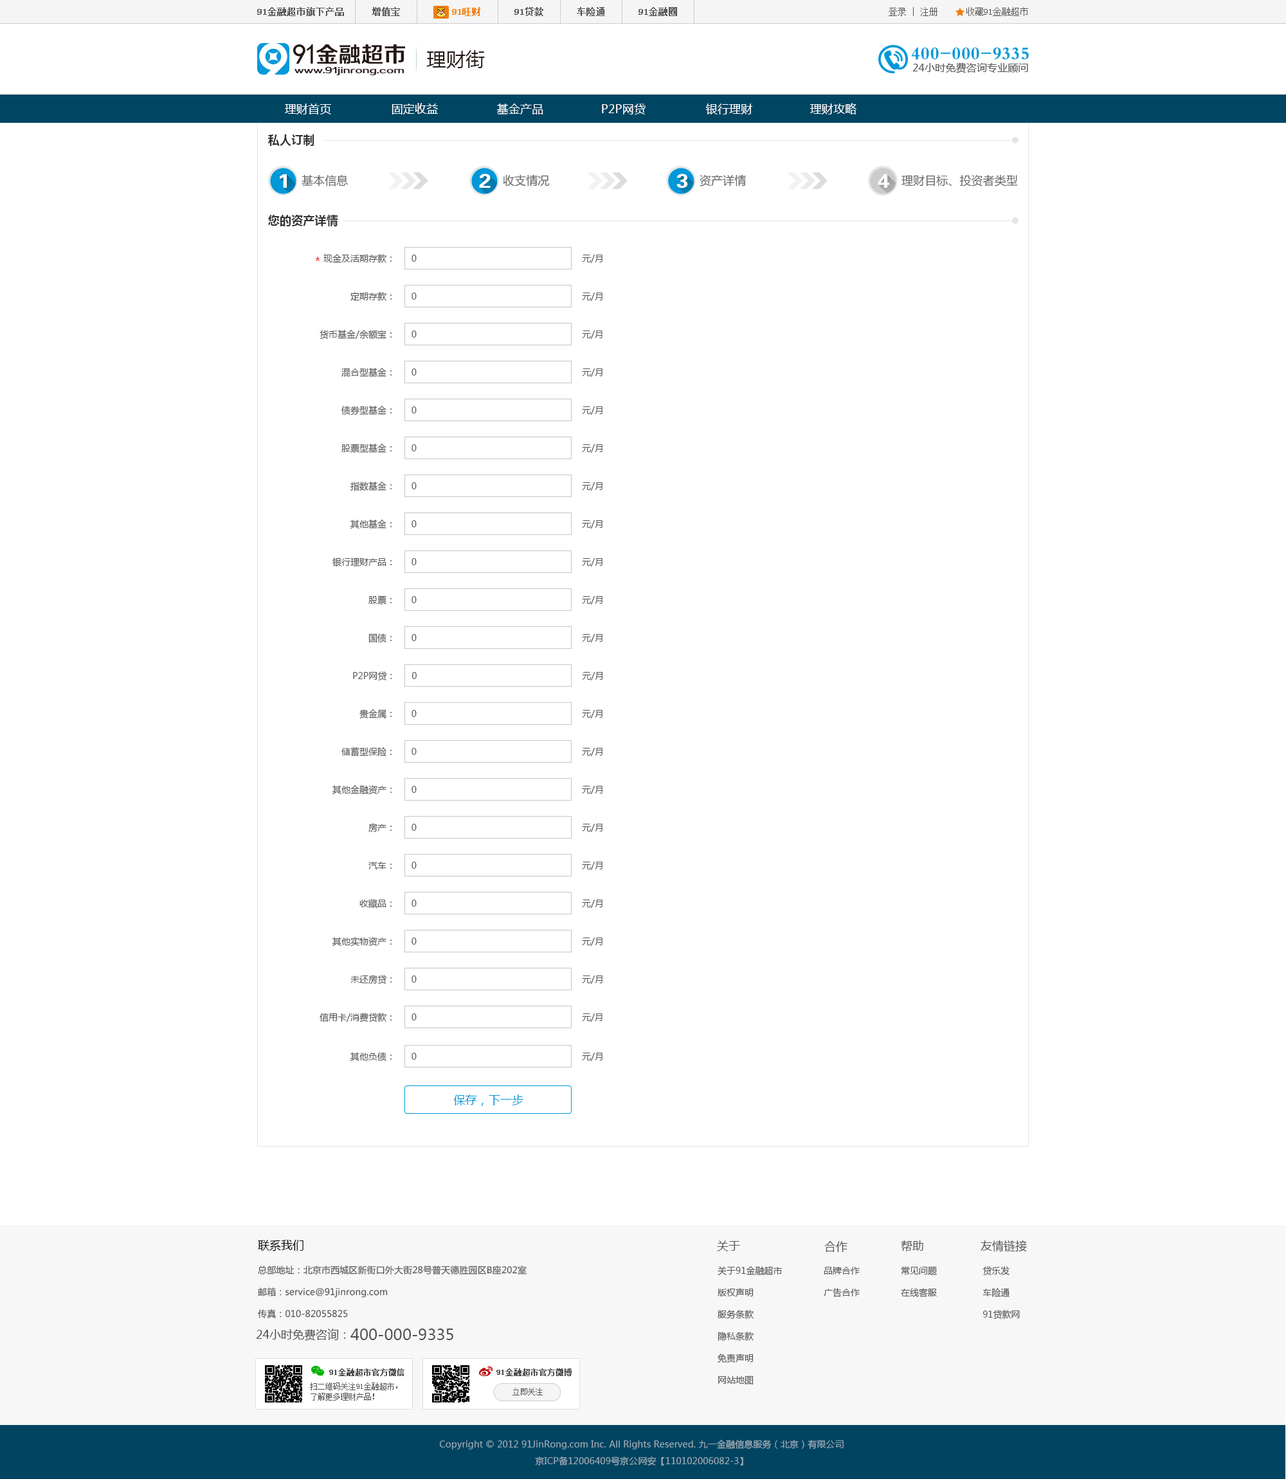
<style>
.page{position:relative;width:1286px;height:1479px;background:#ffffff}
.page>*{position:absolute;margin:0}
.t1{font:19.3px "MicrosoftYaHei";letter-spacing:0.01em;color:#231815}
.t2{font:11.6px "MicrosoftYaHei";letter-spacing:0.01em;color:#ffffff}
.t3{font:11.6px "MicrosoftYaHei-Bold";letter-spacing:0.01em;color:#333333}
.t4{font:19.6px "FZDHTJW--GB1-0";color:#fefeff;scale:1.12 1}
.t5{font:19.6px "FZDHTJW--GB1-0";color:#fefefe;scale:1.12 1}
.t6{font:19.6px "FZDHTJW--GB1-0";color:#ffffff;scale:1.12 1}
.t7{font:11.6px "MicrosoftYaHei";color:#666666}
.t8{font:11.6px "MicrosoftYaHei";letter-spacing:0.01em;color:#ff0000}
.t9{font:9px "MicrosoftYaHei";color:#555555}
.t10{font:11.6px "MicrosoftYaHei";letter-spacing:0.01em;color:#0098d9}
</style>
<div class="page">
<p class="t1" style="left:426px;top:50px;width:59px;height:19px">理财街</p>
<p class="t2" style="left:285px;top:104px;width:46px;height:10px">理财首页</p>
<p class="t2" style="left:392px;top:103px;width:46px;height:11px">固定收益</p>
<p class="t2" style="left:497px;top:103px;width:46px;height:11px">基金产品</p>
<p class="t2" style="left:602px;top:104px;width:43px;height:10px">P2P网贷</p>
<p class="t2" style="left:705px;top:104px;width:48px;height:10px">银行理财</p>
<p class="t2" style="left:810px;top:103px;width:46px;height:11px">理财攻略</p>
<p class="t3" style="left:268px;top:134px;width:46px;height:12px">私人订制</p>
<p class="t4" style="left:479px;top:174px;width:12px;height:14px">2</p>
<p class="t5" style="left:676px;top:174px;width:12px;height:14px">3</p>
<p class="t6" style="left:280px;top:174px;width:7px;height:14px">1</p>
<p class="t7" style="left:302px;top:174px;width:46px;height:12px">基本信息</p>
<p class="t7" style="left:503px;top:174px;width:47px;height:12px">收支情况</p>
<p class="t7" style="left:699px;top:174px;width:47px;height:12px">资产详情</p>
<p class="t6" style="left:878px;top:174px;width:12px;height:14px">4</p>
<p class="t7" style="left:901px;top:174px;width:117px;height:12px">理财目标、投资者类型</p>
<p class="t3" style="left:268px;top:215px;width:70px;height:11px">您的资产详情</p>
<p class="t8" style="left:315px;top:256px;width:5px;height:5px">*</p>
<p class="t9" style="left:323px;top:254px;width:279px;height:9px">现金及活期存款：      0                                                              元/月</p>
<p class="t9" style="left:350px;top:292px;width:252px;height:9px">定期存款：      0                                                              元/月</p>
<p class="t9" style="left:320px;top:330px;width:282px;height:9px">货币基金/余额宝：      0                                                              元/月</p>
<p class="t9" style="left:341px;top:368px;width:261px;height:9px">混合型基金：      0                                                              元/月</p>
<p class="t9" style="left:341px;top:406px;width:261px;height:9px">债券型基金：      0                                                              元/月</p>
<p class="t9" style="left:341px;top:444px;width:261px;height:9px">股票型基金：      0                                                              元/月</p>
<p class="t9" style="left:350px;top:482px;width:252px;height:9px">指数基金：      0                                                              元/月</p>
<p class="t9" style="left:350px;top:519px;width:252px;height:10px">其他基金：      0                                                              元/月</p>
<p class="t9" style="left:332px;top:557px;width:270px;height:9px">银行理财产品：      0                                                              元/月</p>
<p class="t9" style="left:368px;top:595px;width:234px;height:9px">股票：      0                                                              元/月</p>
<p class="t9" style="left:368px;top:633px;width:234px;height:10px">国债：      0                                                              元/月</p>
<p class="t9" style="left:353px;top:671px;width:250px;height:10px">P2P网贷：      0                                                              元/月</p>
<p class="t9" style="left:359px;top:709px;width:243px;height:10px">贵金属：      0                                                              元/月</p>
<p class="t9" style="left:341px;top:747px;width:261px;height:9px">储蓄型保险：      0                                                              元/月</p>
<p class="t9" style="left:332px;top:785px;width:270px;height:10px">其他金融资产：      0                                                              元/月</p>
<p class="t9" style="left:368px;top:823px;width:234px;height:10px">房产：      0                                                              元/月</p>
<p class="t9" style="left:368px;top:861px;width:234px;height:9px">汽车：      0                                                              元/月</p>
<p class="t9" style="left:359px;top:899px;width:243px;height:9px">收藏品：      0                                                              元/月</p>
<p class="t9" style="left:332px;top:937px;width:270px;height:9px">其他实物资产：      0                                                              元/月</p>
<p class="t9" style="left:350px;top:975px;width:252px;height:9px">未还房贷：      0                                                              元/月</p>
<p class="t9" style="left:320px;top:1013px;width:282px;height:9px">信用卡/消费贷款：      0                                                              元/月</p>
<p class="t9" style="left:350px;top:1052px;width:252px;height:9px">其他负债：      0                                                              元/月</p>
<p class="t10" style="left:453px;top:1094px;width:70px;height:12px">保存，下一步</p>
</div>
